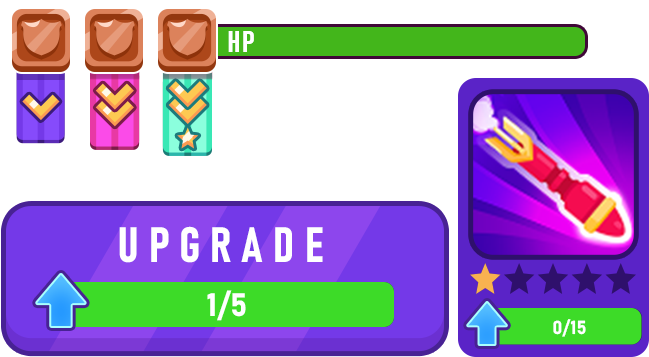
<style>
.page{position:relative;width:649px;height:357px;background:#ffffff}
.page>*{position:absolute;margin:0}
.t1{font:30.1px "Bahnschrift-BoldCondensed";letter-spacing:-0.2em;color:#ffffff}
.t2{font:31.9px "Bahnschrift-Bold";color:#ffffff}
.t3{font:18.6px "Bahnschrift-Bold";color:#ffffff}
</style>
<div class="page">
<p class="t1" style="left:228px;top:31px;width:26px;height:21px">HP</p>
<p class="t2" style="left:207px;top:290px;width:39px;height:31px">1/5</p>
<p class="t3" style="left:553px;top:319px;width:33px;height:18px">0/15</p>
</div>
